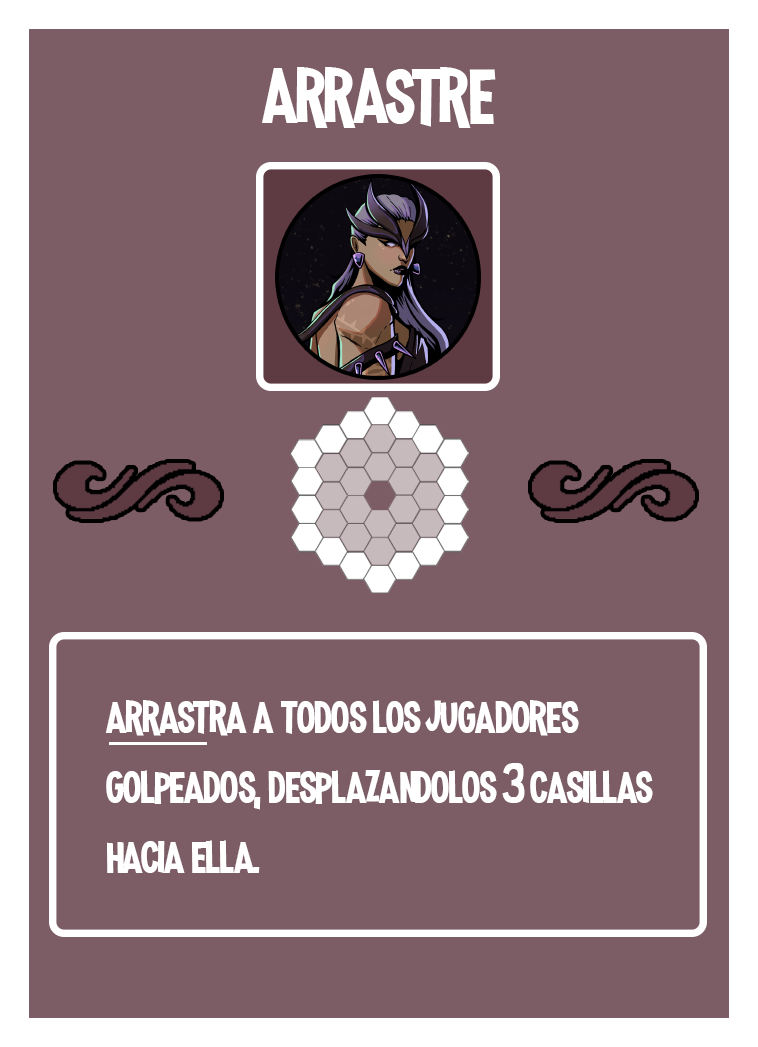
<style>
.page{position:relative;width:758px;height:1047px;background:#7d5d65}
.page>*{position:absolute;margin:0}
.t1{font:100px "MadnessHyperactive";color:#ffffff}
.t2{font:58.3px "MadnessHyperactive";color:#ffffff}
</style>
<div class="page">
<p class="t1" style="left:262px;top:67px;width:234px;height:61px">arrastre</p>
<p class="t2" style="left:105px;top:700px;width:548px;height:173px">arrastra a todos los jugadores golpeados, desplazandolos 3 casillas hacia ella.</p>
</div>
